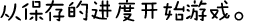
<style>
.page{position:relative;width:267px;height:22px;background:#ffffff}
.page>*{position:absolute;margin:0}
.t1{font:26px "¢è?";color:#000000}
</style>
<div class="page">
<p class="t1" style="left:0px;top:0px;width:244px;height:22px">从保存的进度开始游戏。</p>
</div>
